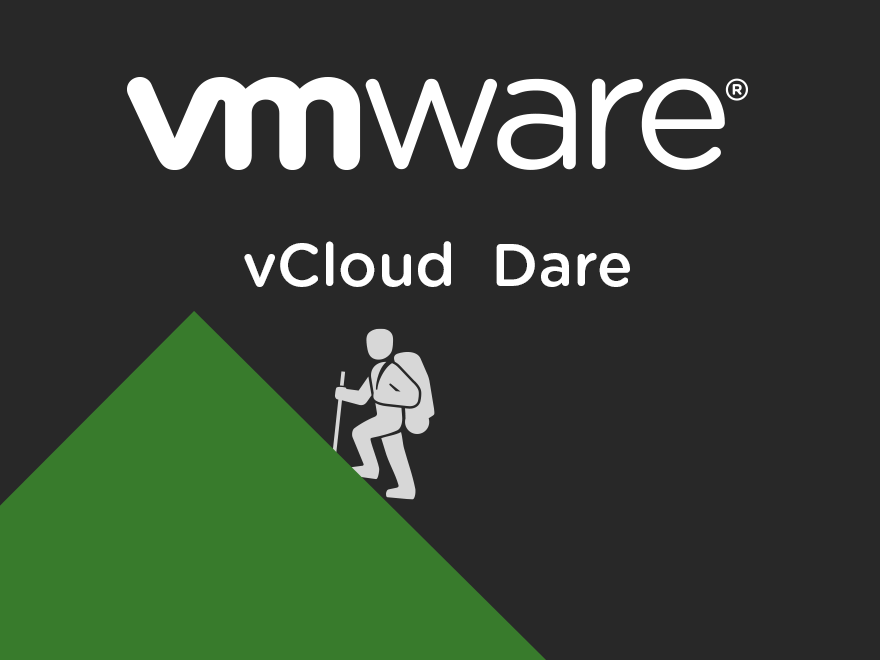
<style>
.page{position:relative;width:880px;height:660px;background:#282828}
.page>*{position:absolute;margin:0}
.t1{font:60px "GothamRounded-Medium";color:#ffffff}
</style>
<div class="page">
<p class="t1" style="left:244px;top:241px;width:386px;height:46px">vCloud  Dare</p>
</div>
